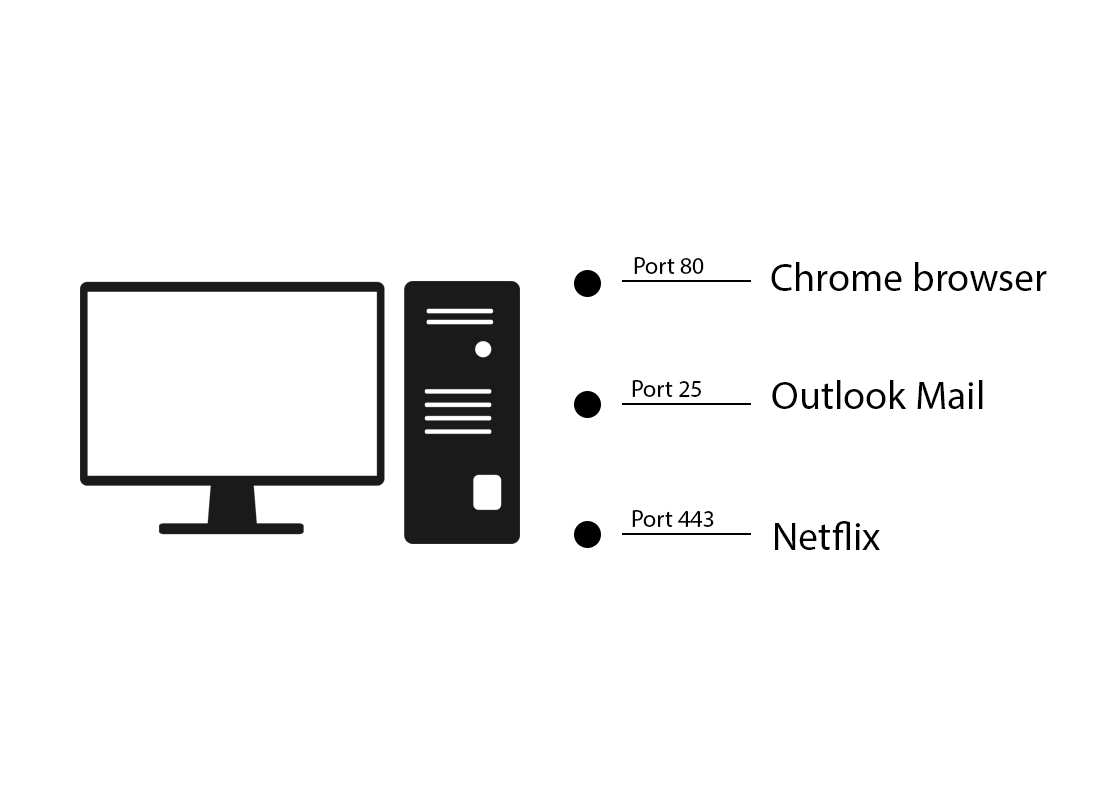
<style>
.page{position:relative;width:1100px;height:800px;background:#ffffff}
.page>*{position:absolute;margin:0}
.t1{font:24px "MyriadPro-Regular";color:#000000}
.t2{font:40px "MyriadPro-Regular";color:#000000}
</style>
<div class="page">
<p class="t1" style="left:634px;top:257px;width:70px;height:17px">Port 80</p>
<p class="t2" style="left:771px;top:262px;width:276px;height:29px">Chrome browser</p>
<p class="t1" style="left:632px;top:380px;width:69px;height:17px">Port 25</p>
<p class="t2" style="left:772px;top:380px;width:211px;height:29px">Outlook Mail</p>
<p class="t1" style="left:632px;top:510px;width:82px;height:17px">Port 443</p>
<p class="t2" style="left:775px;top:521px;width:105px;height:29px">Netflix</p>
</div>
